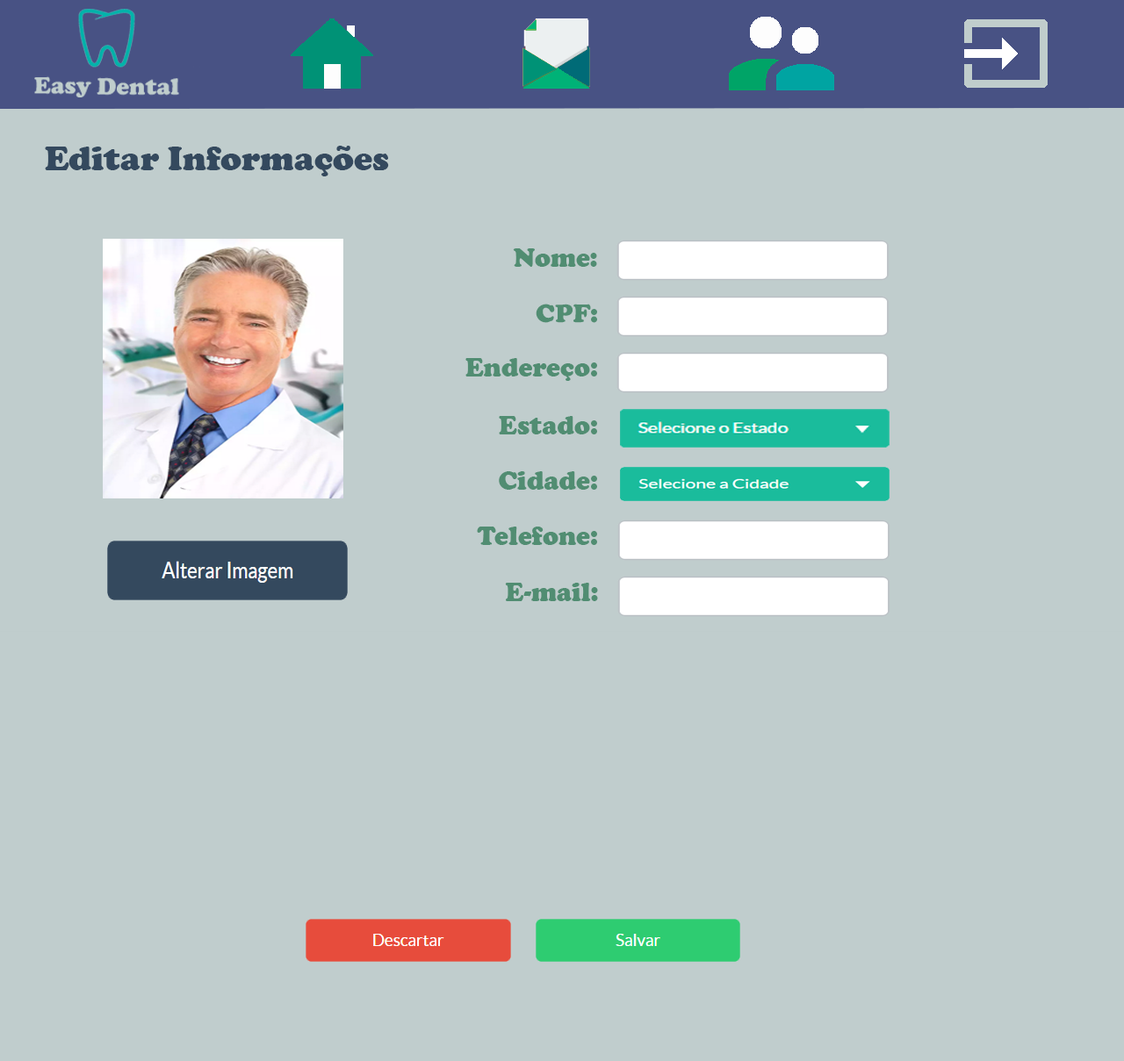
<style>
.page{position:relative;width:1124px;height:1061px;background:#c0cdcd}
.page>*{position:absolute;margin:0}
.t1{font:35.1px "CooperBlack";color:#34495e}
.t2{font:27.1px "CooperBlack";color:#518d72}
.t3{font:26.3px "CooperBlack";color:#518d72}
</style>
<div class="page">
<p class="t1" style="left:45px;top:146px;width:344px;height:30px">Editar Informações</p>
<p class="t2" style="left:513px;top:248px;width:84px;height:19px">Nome:</p>
<p class="t3" style="left:535px;top:304px;width:62px;height:19px">CPF:</p>
<p class="t2" style="left:465px;top:358px;width:132px;height:23px">Endereço:</p>
<p class="t2" style="left:499px;top:416px;width:98px;height:19px">Estado:</p>
<p class="t2" style="left:499px;top:471px;width:98px;height:19px">Cidade:</p>
<p class="t2" style="left:477px;top:527px;width:120px;height:18px">Telefone:</p>
<p class="t2" style="left:505px;top:583px;width:93px;height:18px">E-mail:</p>
</div>
